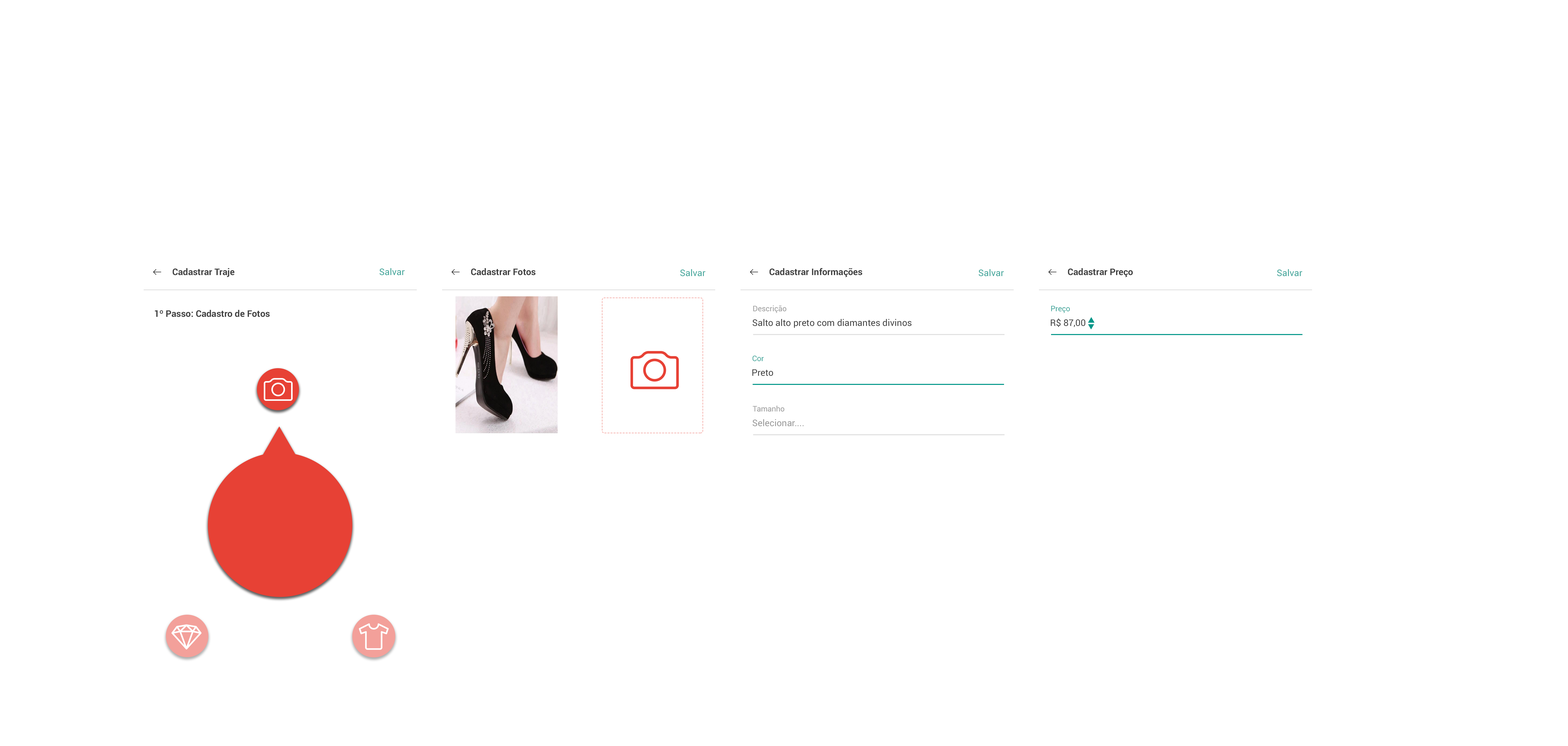
<style>
.page{position:relative;width:1568px;height:746px;background:#ffffff}
.page>*{position:absolute;margin:0}
.t1{font:9.1px "Roboto-Bold";color:#424242}
.t2{font:9.1px "Roboto-Regular";color:#42a59a}
.t3{font:7.6px "Roboto-Regular";color:#999999}
.t4{font:7.6px "Roboto-Regular";color:#42a59a}
.t5{font:9.1px "Roboto-Regular";color:#424242}
.t6{font:9.1px "Roboto-Regular";color:#999999}
</style>
<div class="page">
<p class="t1" style="left:172px;top:268px;width:62px;height:9px">Cadastrar Traje</p>
<p class="t2" style="left:380px;top:268px;width:25px;height:7px">Salvar</p>
<p class="t1" style="left:471px;top:268px;width:65px;height:7px">Cadastrar Fotos</p>
<p class="t2" style="left:680px;top:269px;width:25px;height:7px">Salvar</p>
<p class="t1" style="left:769px;top:268px;width:93px;height:9px">Cadastrar Informações</p>
<p class="t2" style="left:979px;top:269px;width:25px;height:7px">Salvar</p>
<p class="t1" style="left:1068px;top:268px;width:65px;height:9px">Cadastrar Preço</p>
<p class="t2" style="left:1277px;top:269px;width:25px;height:7px">Salvar</p>
<p class="t3" style="left:753px;top:305px;width:33px;height:8px">Descrição</p>
<p class="t4" style="left:1051px;top:306px;width:19px;height:7px">Preço</p>
<p class="t1" style="left:155px;top:310px;width:115px;height:7px">1º Passo: Cadastro de Fotos</p>
<p class="t5" style="left:753px;top:319px;width:158px;height:9px">Salto alto preto com diamantes divinos</p>
<p class="t5" style="left:1051px;top:318px;width:34px;height:9px">R$ 87,00</p>
<p class="t4" style="left:752px;top:355px;width:12px;height:6px">Cor</p>
<p class="t5" style="left:752px;top:369px;width:21px;height:7px">Preto</p>
<p class="t3" style="left:753px;top:405px;width:31px;height:6px">Tamanho</p>
<p class="t6" style="left:753px;top:419px;width:51px;height:7px">Selecionar....</p>
</div>
